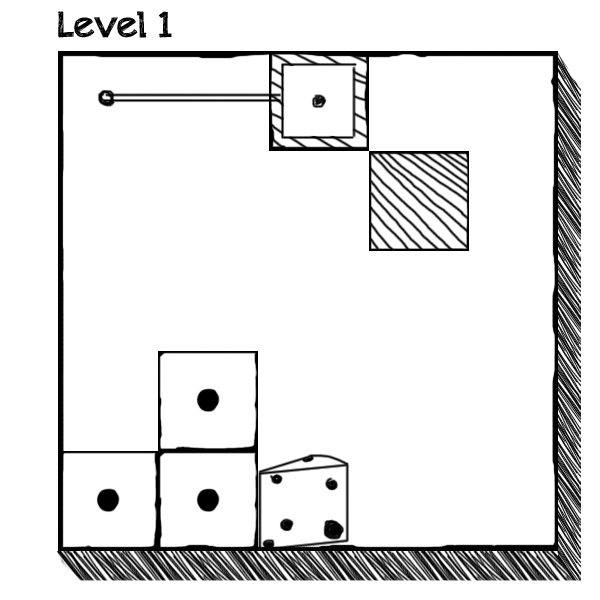
<style>
.page{position:relative;width:600px;height:600px;background:#ffffff}
.page>*{position:absolute;margin:0}
.t1{font:36px "appleberry";color:#000000}
</style>
<div class="page">
<p class="t1" style="left:58px;top:11px;width:114px;height:27px">Level 1</p>
</div>
